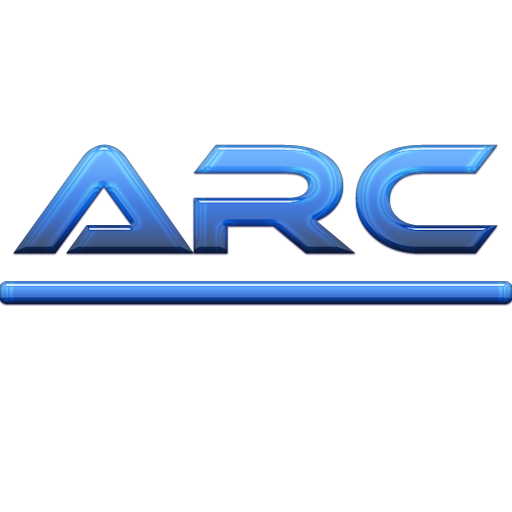
<style>
.page{position:relative;width:512px;height:512px;background:#ffffff}
.page>*{position:absolute;margin:0}
.t1{font:150px "Ethnocentric";letter-spacing:-0.025em}
</style>
<div class="page">
<p class="t1" style="left:13px;top:144px;width:485px;height:110px">ARC</p>
</div>
